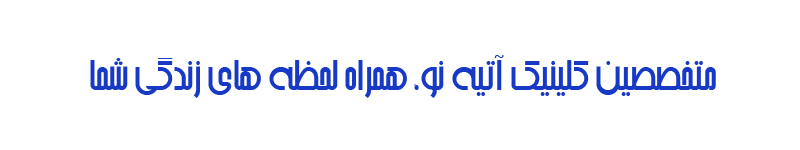
<style>
.page{position:relative;width:800px;height:150px;background:#ffffff}
.page>*{position:absolute;margin:0}
.t1{font:54px "Arshia";color:#1839c6}
</style>
<div class="page">
<p class="t1" style="left:90px;top:55px;width:626px;height:43px">متخصصین کلینیک آتیه نو، همراه لحظه های زندگی شما</p>
</div>
